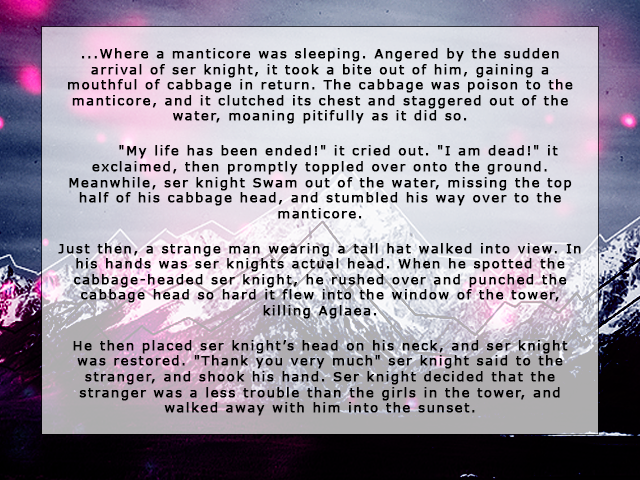
<style>
.page{position:relative;width:640px;height:480px}
.page>*{position:absolute;margin:0}
.t1{font:13px "Verdana";letter-spacing:0.1em;color:#000000;font-weight:bold}
</style>
<div class="page">
<p class="t1" style="left:58px;top:48px;width:523px;height:368px;text-align:center">...Where a manticore was sleeping. Angered by the sudden arrival of ser knight, it took a bite out of him, gaining a mouthful of cabbage in return. The cabbage was poison to the manticore, and it clutched its chest and staggered out of the water, moaning pitifully as it did so. <br><br> "My life has been ended!" it cried out. "I am dead!" it exclaimed, then promptly toppled over onto the ground. Meanwhile, ser knight Swam out of the water, missing the top half of his cabbage head, and stumbled his way over to the manticore. <br> <br>Just then, a strange man wearing a tall hat walked into view. In his hands was ser knights actual head. When he spotted the cabbage-headed ser knight, he rushed over and punched the cabbage head so hard it flew into the window of the tower, killing Aglaea. <br><br>He then placed ser knight’s head on his neck, and ser knight was restored. "Thank you very much" ser knight said to the stranger, and shook his hand. Ser knight decided that the stranger was a less trouble than the girls in the tower, and walked away with him into the sunset.</p>
</div>
